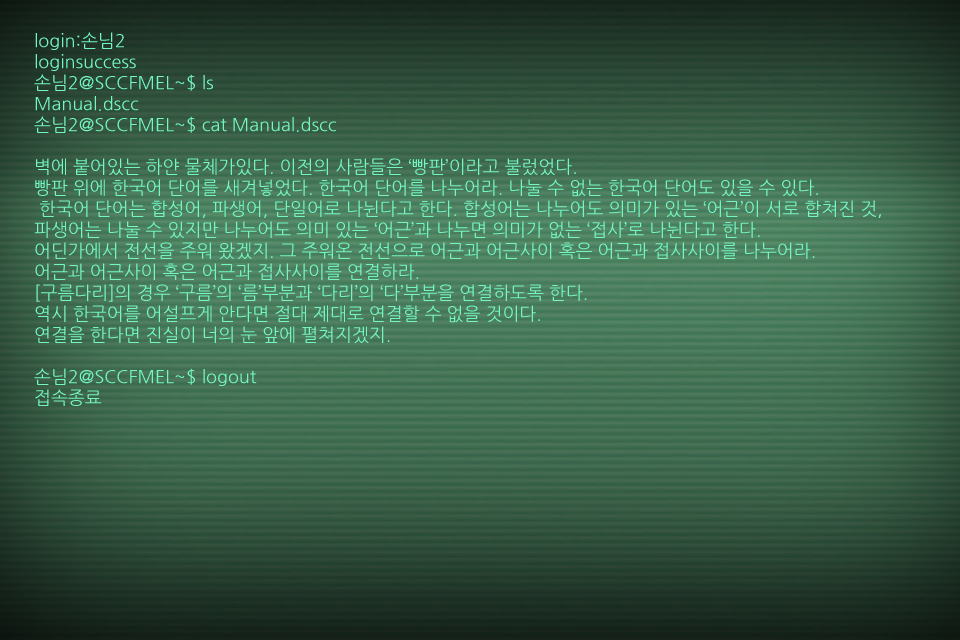
<style>
.page{position:relative;width:960px;height:640px}
.page>*{position:absolute;margin:0}
.t1{font:18px/21px "NanumGothic";color:#73f6c2}
</style>
<div class="page">
<p class="t1" style="left:34px;top:32px;width:848px;height:374px">login:손님2<br>loginsuccess<br>손님2@SCCFMEL~$ ls<br>Manual.dscc<br>손님2@SCCFMEL~$ cat Manual.dscc<br><br>벽에 붙어있는 하얀 물체가있다. 이전의 사람들은 ‘빵판’이라고 불렀었다.<br>빵판 위에 한국어 단어를 새겨넣었다. 한국어 단어를 나누어라. 나눌 수 없는 한국어 단어도 있을 수 있다.<br> 한국어 단어는 합성어, 파생어, 단일어로 나뉜다고 한다. 합성어는 나누어도 의미가 있는 ‘어근’이 서로 합쳐진 것,<br>파생어는 나눌 수 있지만 나누어도 의미 있는 ‘어근’과 나누면 의미가 없는 ‘접사’로 나뉜다고 한다.<br>어딘가에서 전선을 주워 왔겠지. 그 주워온 전선으로 어근과 어근사이 혹은 어근과 접사사이를 나누어라.<br>어근과 어근사이 혹은 어근과 접사사이를 연결하라.<br>[구름다리]의 경우 ‘구름’의 ‘름’부분과 ‘다리’의 ‘다’부분을 연결하도록 한다.<br>역시 한국어를 어설프게 안다면 절대 제대로 연결할 수 없을 것이다.<br>연결을 한다면 진실이 너의 눈 앞에 펼쳐지겠지.<br><br>손님2@SCCFMEL~$ logout<br>접속종료</p>
</div>
